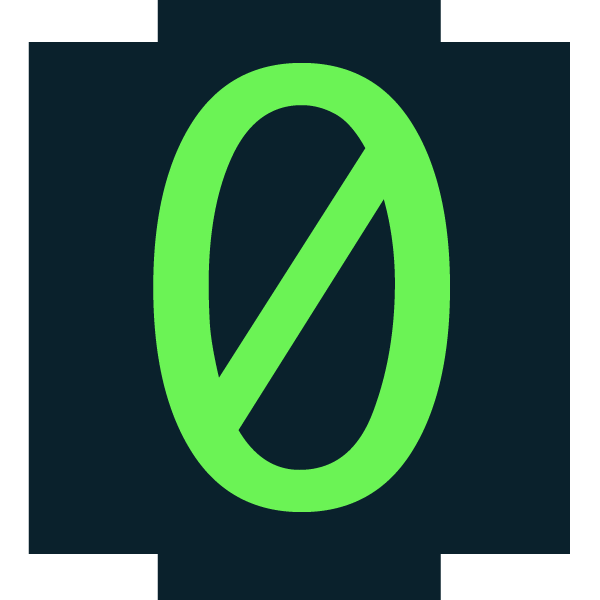
<style>
.page{position:relative;width:600px;height:600px;background:#0a212c}
.page>*{position:absolute;margin:0}
.t1{font:559.2px "Monaco";color:#6bf355}
</style>
<div class="page">
<p class="t1" style="left:153px;top:63px;width:297px;height:449px">0</p>
</div>
